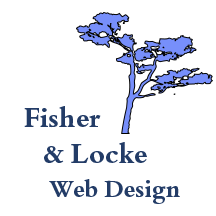
<style>
.page{position:relative;width:216px;height:216px;background:#ffffff}
.page>*{position:absolute;margin:0}
.t1{font:30px "BemboBookMTPro-Bold";color:#233c67}
.t2{font:26px "BemboBookMTPro-Bold";color:#233c67}
</style>
<div class="page">
<p class="t1" style="left:24px;top:106px;width:123px;height:57px">Fisher <br>   &amp; Locke</p>
<p class="t2" style="left:49px;top:179px;width:131px;height:25px">Web Design</p>
</div>
